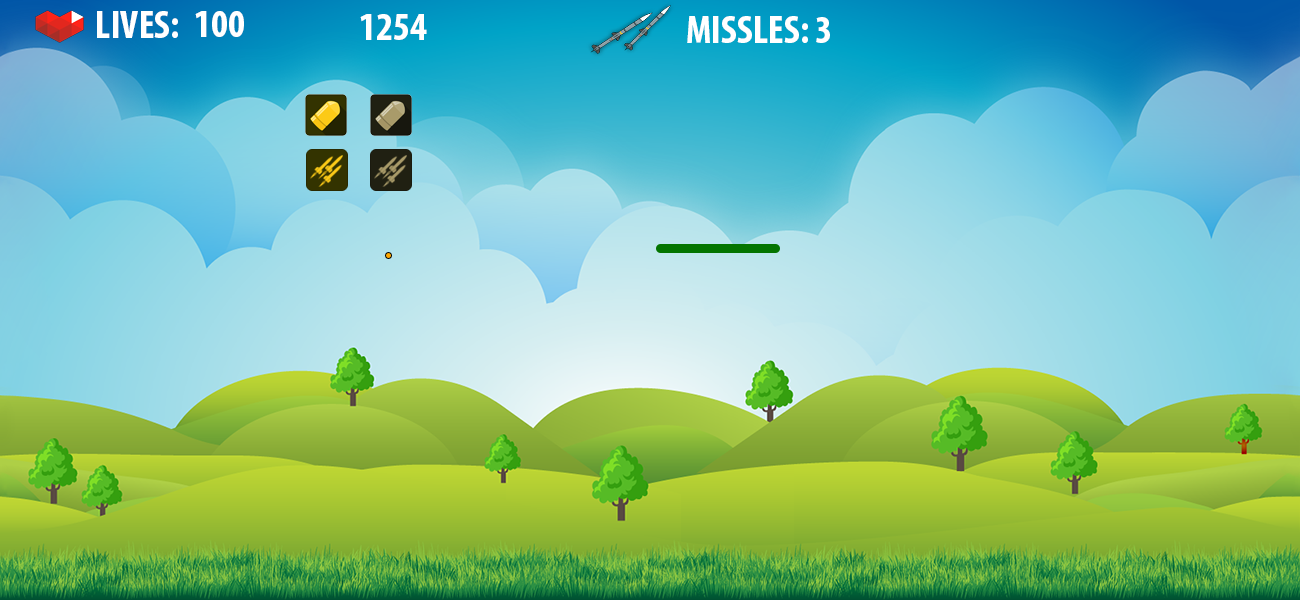
<style>
.page{position:relative;width:1300px;height:600px}
.page>*{position:absolute;margin:0}
.t1{font:40px "MyriadPro-BoldCond";color:#ffffff}
</style>
<div class="page">
<p class="t1" style="left:97px;top:11px;width:81px;height:27px">LIVES: 11001++100100v</p>
<p class="t1" style="left:195px;top:11px;width:49px;height:26px">100</p>
<p class="t1" style="left:360px;top:14px;width:67px;height:26px">1254</p>
<p class="t1" style="left:687px;top:16px;width:143px;height:27px">MISSLES: 3</p>
</div>
